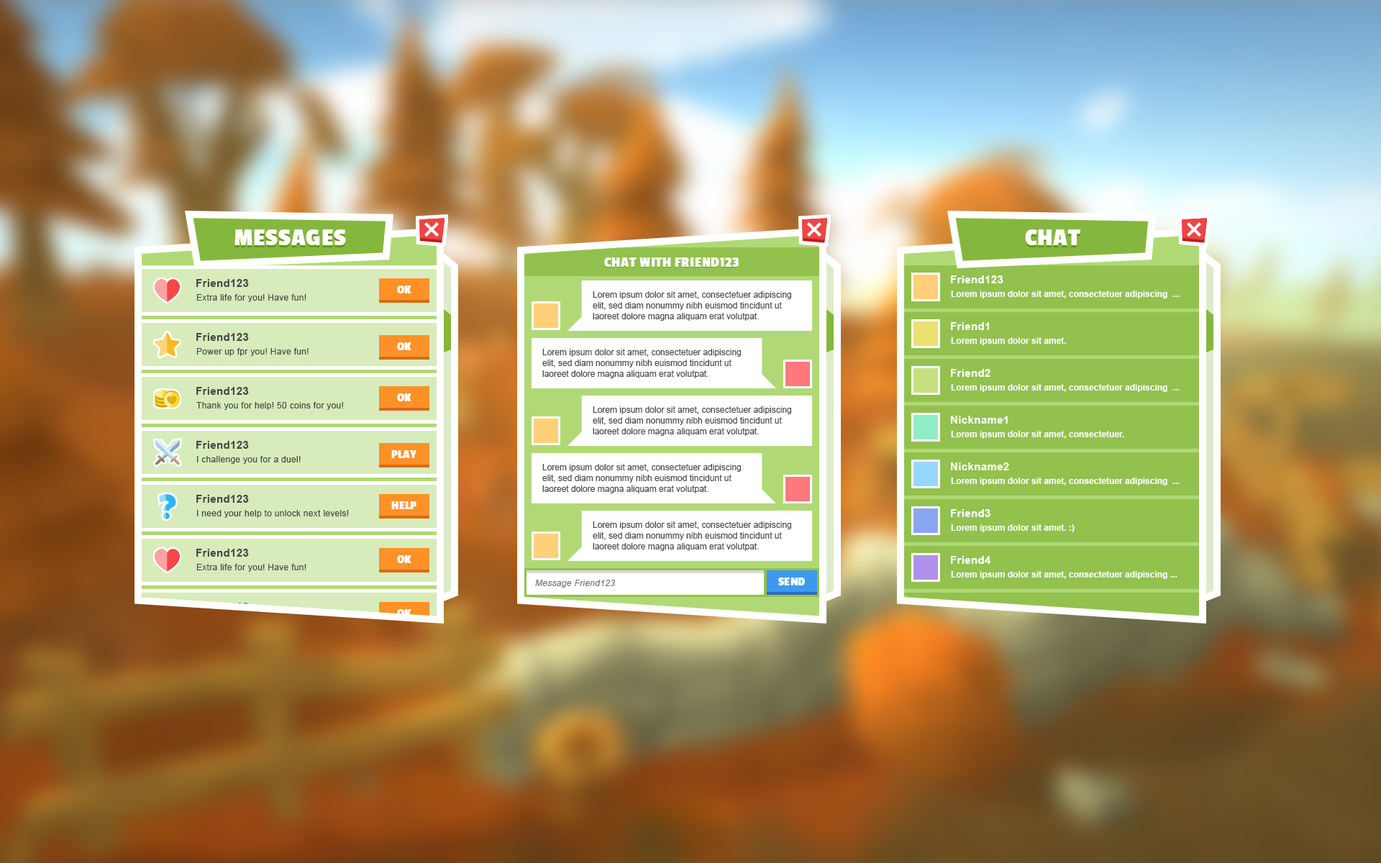
<style>
.page{position:relative;width:1381px;height:863px}
.page>*{position:absolute;margin:0}
.t1{font:25.2px "PassionOne-Bold";letter-spacing:0.025em;color:#ffffff;text-transform:uppercase}
.t2{font:14.4px "PassionOne-Bold";letter-spacing:0.025em;color:#ffffff;text-transform:uppercase}
.t3{font:10.8px "Arial-BoldMT";letter-spacing:0.025em;color:#454545}
.t4{font:10.8px "Arial-BoldMT";letter-spacing:0.025em;color:#ffffff}
.t5{font:12.2px "PassionOne-Bold";letter-spacing:0.025em;color:#ffffff;text-transform:uppercase}
.t6{font:8.6px/10.8px "ArialMT";color:#454545}
.t7{font:8.6px "Arial-BoldMT";color:#fffefe}
.t8{font:8.6px "ArialMT";letter-spacing:0.025em;color:#454545}
.t9{font:8.6px "Arial-ItalicMT";letter-spacing:0.025em;color:#ffffff}
.t10{font:8.6px "ArialMT";color:#fffefe}
</style>
<div class="page">
<p class="t1" style="left:235px;top:229px;width:111px;height:16px">Messages</p>
<p class="t1" style="left:1025px;top:229px;width:56px;height:16px">Chat</p>
<p class="t2" style="left:604px;top:258px;width:136px;height:9px">Chat with Friend123</p>
<p class="t3" style="left:196px;top:279px;width:53px;height:8px">Friend123</p>
<p class="t4" style="left:951px;top:276px;width:53px;height:7px">Friend123</p>
<p class="t5" style="left:397px;top:286px;width:15px;height:8px">Ok</p>
<p class="t6" style="left:593px;top:291px;width:198px;height:30px">Lorem ipsum dolor sit amet, consectetuer adipiscing elit, sed diam nonummy nibh euismod tincidunt ut laoreet dolore magna aliquam erat volutpat.</p>
<p class="t7" style="left:951px;top:291px;width:229px;height:8px">Lorem ipsum dolor sit amet, consectetuer adipiscing  ...</p>
<p class="t8" style="left:196px;top:294px;width:110px;height:8px">Extra life for you! Have fun!</p>
<p class="t4" style="left:951px;top:322px;width:38px;height:8px">Friend1</p>
<p class="t3" style="left:196px;top:333px;width:53px;height:8px">Friend123</p>
<p class="t7" style="left:951px;top:337px;width:115px;height:8px">Lorem ipsum dolor sit amet.</p>
<p class="t8" style="left:196px;top:348px;width:113px;height:8px">Power up fpr you! Have fun!</p>
<p class="t5" style="left:397px;top:342px;width:15px;height:8px">Ok</p>
<p class="t6" style="left:542px;top:349px;width:199px;height:29px">Lorem ipsum dolor sit amet, consectetuer adipiscing elit, sed diam nonummy nibh euismod tincidunt ut laoreet dolore magna aliquam erat volutpat.</p>
<p class="t4" style="left:951px;top:369px;width:40px;height:8px">Friend2</p>
<p class="t3" style="left:196px;top:387px;width:53px;height:8px">Friend123</p>
<p class="t7" style="left:951px;top:384px;width:229px;height:8px">Lorem ipsum dolor sit amet, consectetuer adipiscing  ...</p>
<p class="t5" style="left:397px;top:394px;width:15px;height:7px">Ok</p>
<p class="t8" style="left:196px;top:402px;width:147px;height:8px">Thank you for help! 50 coins for you!</p>
<p class="t6" style="left:593px;top:406px;width:198px;height:30px">Lorem ipsum dolor sit amet, consectetuer adipiscing elit, sed diam nonummy nibh euismod tincidunt ut laoreet dolore magna aliquam erat volutpat.</p>
<p class="t4" style="left:951px;top:416px;width:57px;height:8px">Nickname1</p>
<p class="t7" style="left:951px;top:431px;width:173px;height:8px">Lorem ipsum dolor sit amet, consectetuer.</p>
<p class="t3" style="left:196px;top:441px;width:53px;height:8px">Friend123</p>
<p class="t8" style="left:197px;top:456px;width:104px;height:8px">I challenge you for a duel!</p>
<p class="t5" style="left:391px;top:450px;width:26px;height:8px">Play</p>
<p class="t6" style="left:542px;top:464px;width:199px;height:30px">Lorem ipsum dolor sit amet, consectetuer adipiscing elit, sed diam nonummy nibh euismod tincidunt ut laoreet dolore magna aliquam erat volutpat.</p>
<p class="t4" style="left:951px;top:463px;width:58px;height:7px">Nickname2</p>
<p class="t7" style="left:951px;top:478px;width:229px;height:8px">Lorem ipsum dolor sit amet, consectetuer adipiscing  ...</p>
<p class="t3" style="left:196px;top:495px;width:53px;height:8px">Friend123</p>
<p class="t5" style="left:391px;top:501px;width:26px;height:8px">Help</p>
<p class="t4" style="left:951px;top:509px;width:40px;height:8px">Friend3</p>
<p class="t8" style="left:197px;top:510px;width:152px;height:8px">I need your help to unlock next levels!</p>
<p class="t6" style="left:593px;top:522px;width:198px;height:29px">Lorem ipsum dolor sit amet, consectetuer adipiscing elit, sed diam nonummy nibh euismod tincidunt ut laoreet dolore magna aliquam erat volutpat.</p>
<p class="t7" style="left:951px;top:524px;width:124px;height:8px">Lorem ipsum dolor sit amet. :)</p>
<p class="t3" style="left:196px;top:549px;width:53px;height:8px">Friend123</p>
<p class="t5" style="left:397px;top:555px;width:15px;height:8px">Ok</p>
<p class="t4" style="left:951px;top:556px;width:40px;height:8px">Friend4</p>
<p class="t8" style="left:196px;top:564px;width:110px;height:8px">Extra life for you! Have fun!</p>
<p class="t9" style="left:535px;top:580px;width:80px;height:8px">Message Friend123</p>
<p class="t5" style="left:778px;top:578px;width:27px;height:8px">Send</p>
<p class="t7" style="left:951px;top:571px;width:227px;height:8px">Lorem ipsum dolor sit amet, consectetuer adipiscing ...</p>
<p class="t4" style="left:951px;top:603px;width:40px;height:8px">Friend4</p>
<p class="t5" style="left:397px;top:609px;width:15px;height:8px">Ok</p>
<p class="t10" style="left:951px;top:618px;width:225px;height:8px">Lorem ipsum dolor sit amet, consectetuer adipiscing elit, ...</p>
</div>
